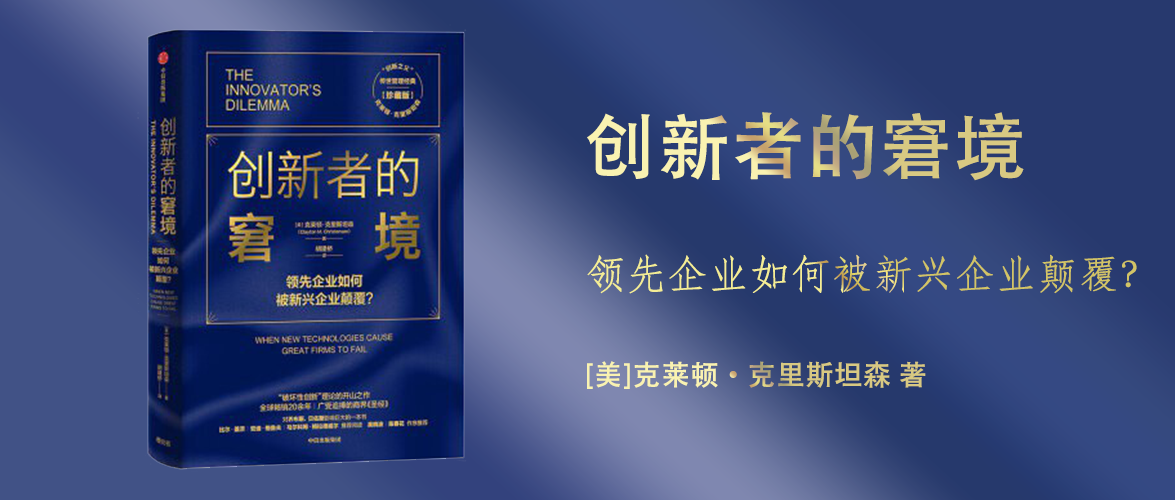
<style>
.page{position:relative;width:1175px;height:500px}
.page>*{position:absolute;margin:0}
.t1{font:72px "AdobeHeitiStd-Regular";font-weight:bold}
.t2{font:40px "STFangsong";font-weight:bold}
.t3{font:28px "AdobeHeitiStd-Regular";font-weight:bold}
</style>
<div class="page">
<p class="t1" style="left:587px;top:112px;width:437px;height:69px">创新者的窘境</p>
<p class="t2" style="left:587px;top:254px;width:550px;height:40px">领先企业如何被新兴企业颠覆？</p>
<p class="t3" style="left:587px;top:361px;width:339px;height:28px">[美]克莱顿·克里斯坦森 著</p>
</div>
